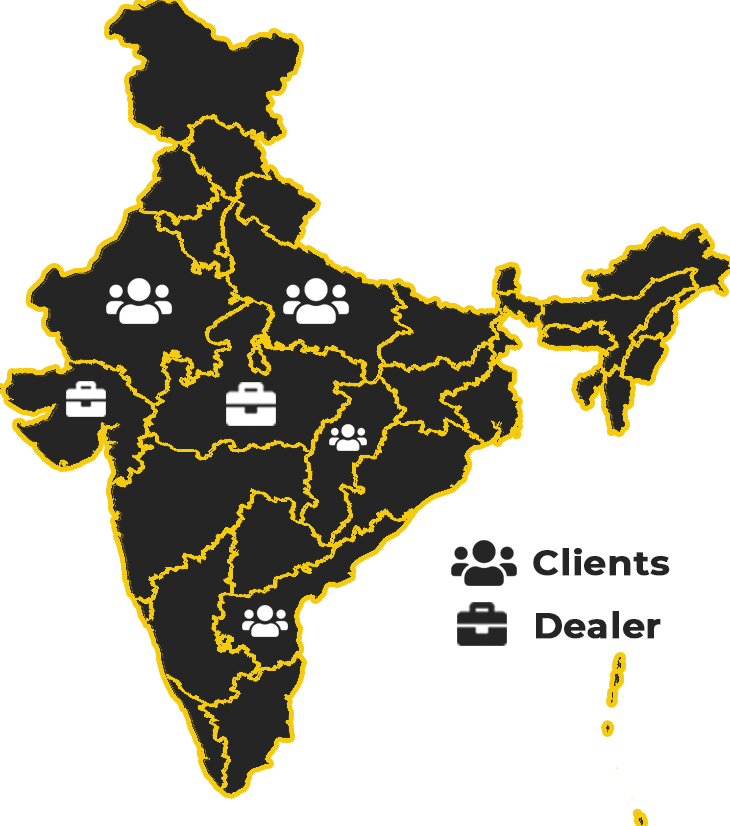
<style>
.page{position:relative;width:730px;height:826px;background:#ffffff}
.page>*{position:absolute;margin:0}
.t1{font:35px "Montserrat-Bold";color:#252525;font-weight:bold;scale:1.03 1}
</style>
<div class="page">
<p class="t1" style="left:533px;top:548px;width:137px;height:28px">Clients</p>
<p class="t1" style="left:536px;top:611px;width:125px;height:28px">Dealer</p>
</div>
